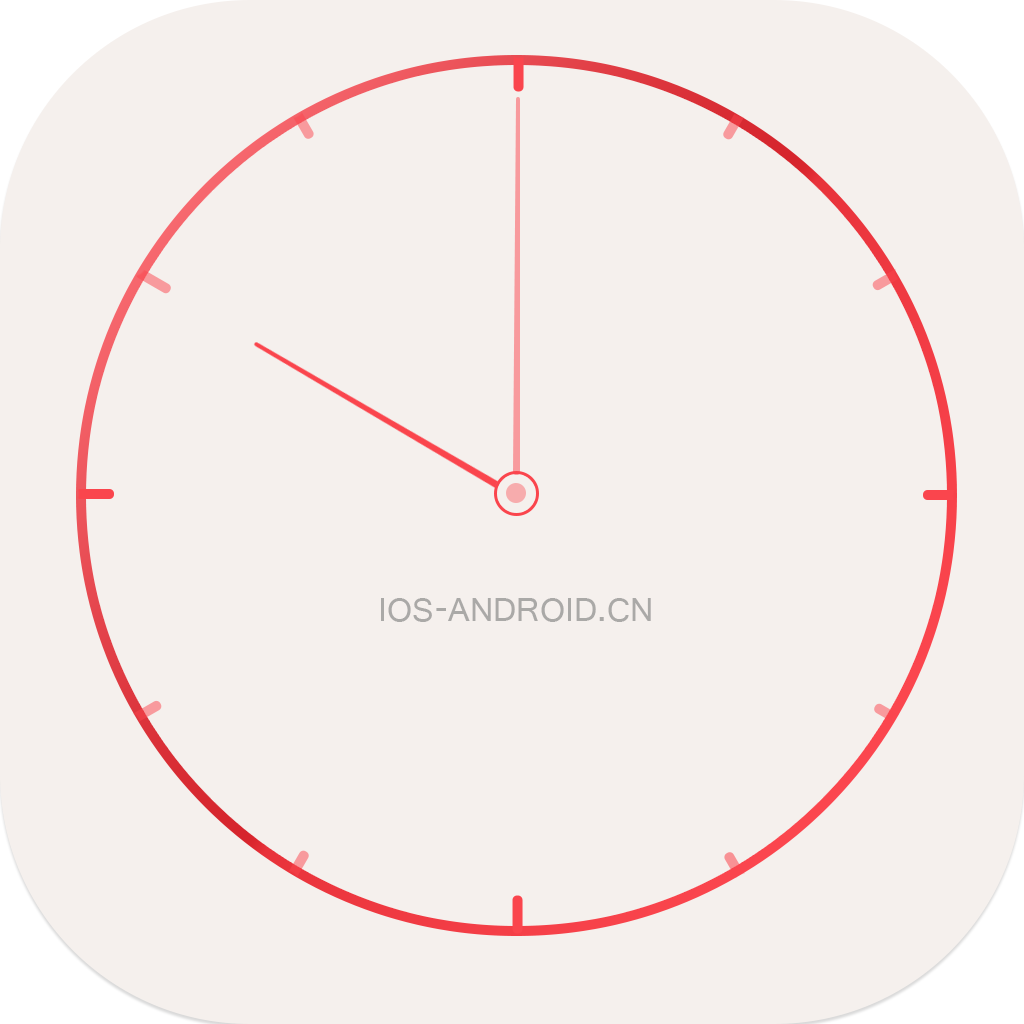
<style>
.page{position:relative;width:1024px;height:1024px;background:#f5f0ed}
.page>*{position:absolute;margin:0}
.t1{font:35px "Gautami";color:#aaa9a7;text-transform:uppercase}
</style>
<div class="page">
<p class="t1" style="left:381px;top:598px;width:270px;height:24px">ios-android.cn</p>
</div>
